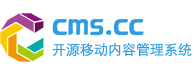
<style>
.page{position:relative;width:193px;height:66px;background:#ffffff}
.page>*{position:absolute;margin:0}
.t1{font:14px "STHeitiSC-Light";letter-spacing:0.001em;color:#2f9be0}
</style>
<div class="page">
<p class="t1" style="left:52px;top:43px;width:140px;height:14px">开源移动内容管理系统</p>
</div>
